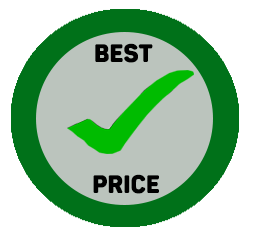
<style>
.page{position:relative;width:254px;height:247px;background:#ffffff}
.page>*{position:absolute;margin:0}
.t1{font:25px "PantonNarrowDemo-Black";color:#000000}
</style>
<div class="page">
<p class="t1" style="left:95px;top:43px;width:58px;height:20px">Best</p>
<p class="t1" style="left:93px;top:174px;width:66px;height:20px">PRICE</p>
</div>
